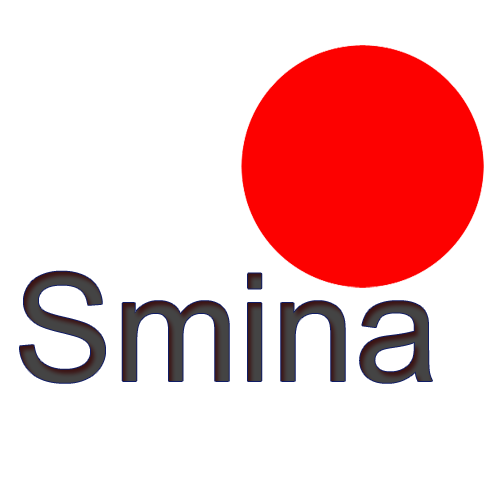
<style>
.page{position:relative;width:500px;height:500px;background:#ffffff}
.page>*{position:absolute;margin:0}
.t1{font:150px "ArialMT";color:#444444}
</style>
<div class="page">
<p class="t1" style="left:20px;top:271px;width:412px;height:112px">Smina</p>
</div>
